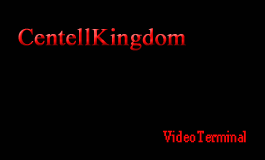
<style>
.page{position:relative;width:265px;height:160px;background:#010101}
.page>*{position:absolute;margin:0}
.t1{font:24px "TimesNewRomanPSMT";font-weight:bold}
.t2{font:14px "MS Serif";color:#fe0909;font-weight:bold}
</style>
<div class="page">
<p class="t1" style="left:18px;top:28px;width:168px;height:23px">CentellKingdom</p>
<p class="t2" style="left:163px;top:130px;width:83px;height:13px">VideoTerminal</p>
</div>
